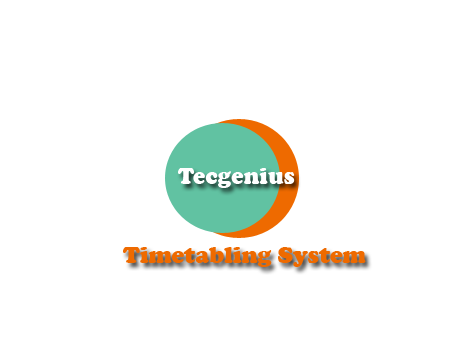
<style>
.page{position:relative;width:454px;height:340px;background:#ffffff}
.page>*{position:absolute;margin:0}
.t1{font:24px "CooperBlack";color:#ffffff}
.t2{font:24px "CooperBlack";color:#ee6a00}
</style>
<div class="page">
<p class="t1" style="left:178px;top:168px;width:117px;height:20px">Tecgenius</p>
<p class="t2" style="left:123px;top:247px;width:243px;height:20px">Timetabling System</p>
</div>
